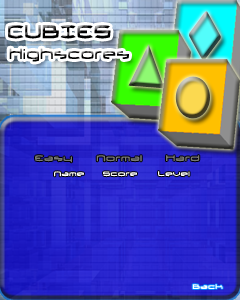
<style>
.page{position:relative;width:240px;height:300px}
.page>*{position:absolute;margin:0}
.t1{font:23.2px "ThundergodII";scale:0.8 1}
.t2{font:18px "ThundergodII";scale:0.8 1}
.t3{font:10px "ThundergodII";color:#767676}
.t4{font:8px "ThundergodII";color:#ffffff}
</style>
<div class="page">
<p class="t1" style="left:8px;top:25px;width:103px;height:14px">CUBIES</p>
<p class="t2" style="left:9px;top:48px;width:120px;height:14px">Highscores</p>
<p class="t3" style="left:35px;top:155px;width:37px;height:8px">Easy</p>
<p class="t3" style="left:96px;top:155px;width:46px;height:7px">Normal</p>
<p class="t3" style="left:166px;top:155px;width:34px;height:7px">Hard</p>
<p class="t4" style="left:54px;top:171px;width:30px;height:6px">Name</p>
<p class="t4" style="left:103px;top:171px;width:34px;height:6px">Score</p>
<p class="t4" style="left:158px;top:171px;width:32px;height:6px">Level</p>
<p class="t4" style="left:192px;top:284px;width:31px;height:5px">Back</p>
</div>
